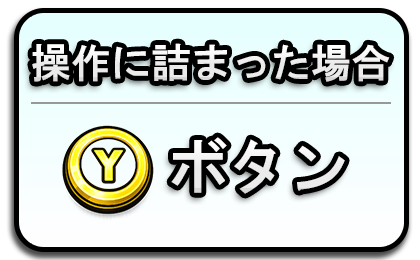
<style>
.page{position:relative;width:420px;height:260px}
.page>*{position:absolute;margin:0}
.t1{font:40px "HGSGothicE";color:#fffefe}
.t2{font:60px "HGSGothicE";color:#fffefe}
</style>
<div class="page">
<p class="t1" style="left:32px;top:43px;width:358px;height:39px">操作に詰まった場合</p>
<p class="t2" style="left:171px;top:137px;width:174px;height:57px">ボタン</p>
</div>
